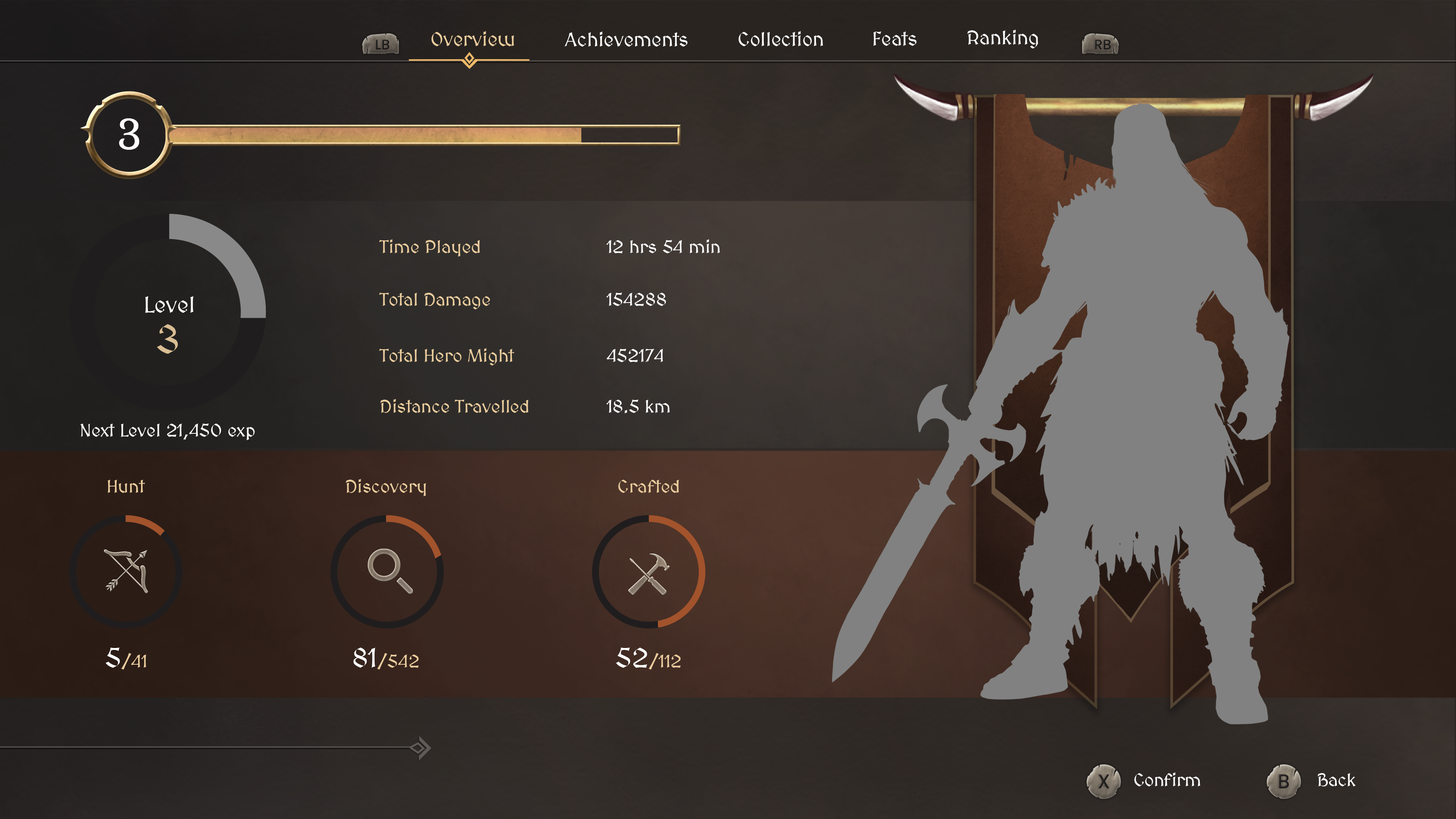
<style>
.page{position:relative;width:1456px;height:819px}
.page>*{position:absolute;margin:0}
.t1{font:19.8px "MedievalSharp";color:#ffffff}
.t2{font:19.8px "MedievalSharp";color:#ebcd9e}
.t3{font:45.8px "Kurale-Regular";letter-spacing:-0.02em;color:#ffffff}
.t4{font:18.2px "MedievalSharp";color:#ebcd9e}
.t5{font:18.2px "MedievalSharp";color:#ffffff}
.t6{font:22.7px "MedievalSharp";color:#ffffff}
.t7{font:40.2px "MedievalSharp";color:#d9bd93}
.t8{font:27.3px "MedievalSharp";color:#ffffff}
.t9{font:18.2px "MedievalSharp";letter-spacing:-0.02em;color:#ffffff}
</style>
<div class="page">
<p class="t1" style="left:967px;top:30px;width:71px;height:19px">Ranking</p>
<p class="t2" style="left:431px;top:31px;width:83px;height:15px">Overview</p>
<p class="t1" style="left:565px;top:31px;width:122px;height:16px">Achievements</p>
<p class="t1" style="left:739px;top:31px;width:84px;height:15px">Collection</p>
<p class="t1" style="left:873px;top:31px;width:43px;height:15px">Feats</p>
<p class="t3" style="left:119px;top:118px;width:21px;height:32px">3</p>
<p class="t4" style="left:379px;top:239px;width:101px;height:18px">Time Played</p>
<p class="t5" style="left:606px;top:239px;width:114px;height:14px">12 hrs 54 min</p>
<p class="t4" style="left:379px;top:293px;width:111px;height:16px">Total Damage</p>
<p class="t5" style="left:606px;top:293px;width:60px;height:13px">154288</p>
<p class="t6" style="left:145px;top:296px;width:48px;height:17px">Level</p>
<p class="t7" style="left:157px;top:324px;width:21px;height:30px">3</p>
<p class="t4" style="left:379px;top:348px;width:136px;height:18px">Total Hero Might</p>
<p class="t5" style="left:607px;top:349px;width:56px;height:13px">452174</p>
<p class="t4" style="left:380px;top:399px;width:149px;height:14px">Distance Travelled</p>
<p class="t5" style="left:606px;top:400px;width:64px;height:14px">18.5 km</p>
<p class="t5" style="left:80px;top:424px;width:175px;height:16px">Next Level 21,450 exp</p>
<p class="t4" style="left:108px;top:480px;width:37px;height:13px">Hunt</p>
<p class="t4" style="left:346px;top:479px;width:80px;height:17px">Discovery</p>
<p class="t4" style="left:618px;top:480px;width:61px;height:13px">Crafted</p>
<p class="t4" style="left:105px;top:648px;width:41px;height:22px"><span class="t8">5</span>/41</p>
<p class="t4" style="left:353px;top:648px;width:66px;height:22px"><span class="t8">81</span>/542</p>
<p class="t4" style="left:616px;top:648px;width:65px;height:22px"><span class="t8">52</span>/112</p>
<p class="t9" style="left:1134px;top:772px;width:66px;height:14px">Confirm</p>
<p class="t9" style="left:1318px;top:773px;width:38px;height:13px">Back</p>
</div>
